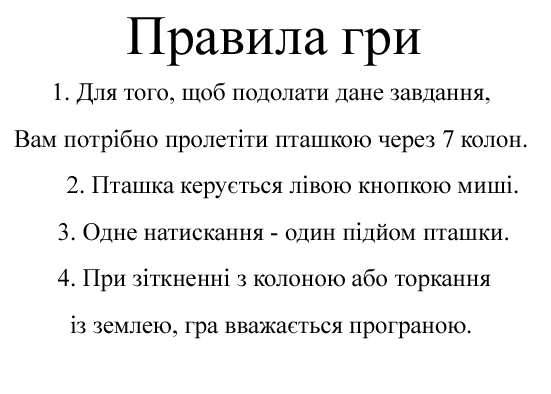
<style>
.page{position:relative;width:551px;height:394px;background:#ffffff}
.page>*{position:absolute;margin:0}
.t1{font:55.6px "TimesNewRomanPSMT";color:#000000}
.t2{font:25px/46.5px "TimesNewRomanPSMT";color:#000000}
</style>
<div class="page">
<p class="t1" style="left:127px;top:17px;width:294px;height:49px">Правила гри</p>
<p class="t2" style="left:14px;top:82px;width:513px;height:257px;text-align:center">1. Для того, щоб подолати дане завдання,<br>Вам потрібно пролетіти пташкою через 7 колон.<br>       2. Пташка керується лівою кнопкою миші.<br>    3. Одне натискання - один підйом пташки.<br>  4. При зіткненні з колоною або торкання <br>із землею, гра вважається програною.</p>
</div>
